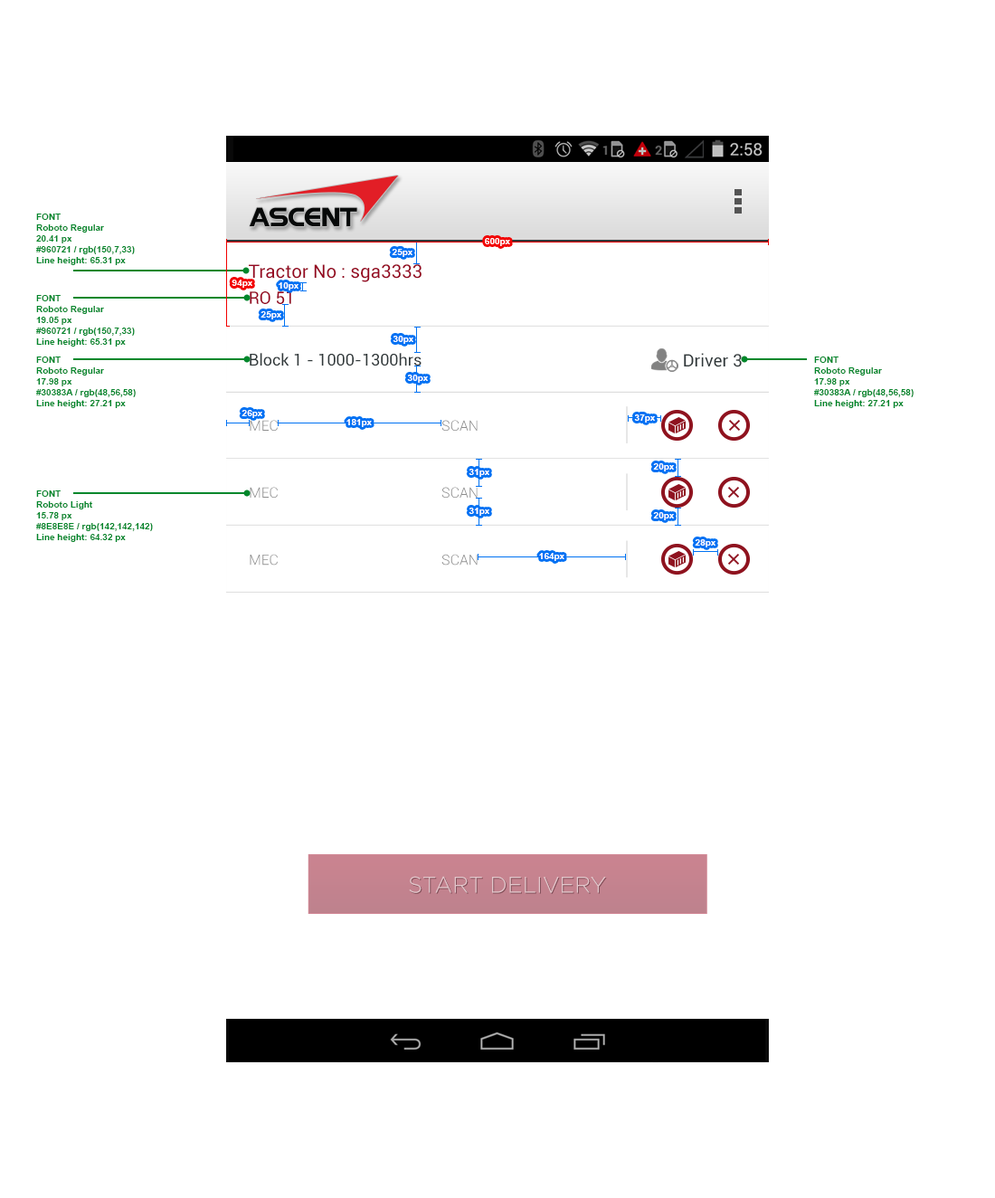
<style>
.page{position:relative;width:995px;height:1198px;background:#ffffff}
.page>*{position:absolute;margin:0}
.t1{font:9px "Arial-BoldMT";color:#00872b}
.t2{font:9px "Arial-BoldMT";color:#ffffff}
.t3{font:18.5px "Roboto-Regular";color:#960721}
.t4{font:17.2px "Roboto-Regular";color:#960721}
.t5{font:16.3px "Roboto-Regular";color:#30383a}
.t6{font:17.2px "Roboto-Regular";color:#30383a}
.t7{font:14.3px "Roboto-Light";color:#8e8e8e}
.t8{font:22.7px "Gotham-Light";color:#e3c7cc}
</style>
<div class="page">
<p class="t1" style="left:36px;top:214px;width:99px;height:51px">FONT <br>Roboto Regular<br>20.41 px<br>#960721 / rgb(150,7,33)<br>Line height: 65.31 px</p>
<p class="t2" style="left:485px;top:238px;width:25px;height:8px">600px</p>
<p class="t2" style="left:392px;top:249px;width:21px;height:8px">25px</p>
<p class="t3" style="left:249px;top:264px;width:173px;height:18px">Tractor No : sga3333</p>
<p class="t2" style="left:232px;top:280px;width:20px;height:8px">94px</p>
<p class="t4" style="left:250px;top:291px;width:41px;height:13px">RO 51</p>
<p class="t2" style="left:279px;top:282px;width:20px;height:8px">10px</p>
<p class="t1" style="left:36px;top:295px;width:99px;height:52px">FONT <br>Roboto Regular<br>19.05 px<br>#960721 / rgb(150,7,33)<br>Line height: 65.31 px</p>
<p class="t2" style="left:261px;top:311px;width:20px;height:8px">25px</p>
<p class="t2" style="left:393px;top:336px;width:21px;height:8px">30px</p>
<p class="t5" style="left:250px;top:353px;width:172px;height:13px">Block 1 - 1000-1300hrs</p>
<p class="t6" style="left:684px;top:353px;width:58px;height:14px">Driver 3</p>
<p class="t1" style="left:36px;top:357px;width:100px;height:51px">FONT <br>Roboto Regular<br>17.98 px<br>#30383A / rgb(48,56,58)<br>Line height: 27.21 px</p>
<p class="t1" style="left:814px;top:357px;width:100px;height:51px">FONT <br>Roboto Regular<br>17.98 px<br>#30383A / rgb(48,56,58)<br>Line height: 27.21 px</p>
<p class="t2" style="left:407px;top:375px;width:21px;height:8px">30px</p>
<p class="t2" style="left:242px;top:410px;width:20px;height:8px">26px</p>
<p class="t7" style="left:250px;top:420px;width:28px;height:11px">MEC</p>
<p class="t2" style="left:347px;top:419px;width:25px;height:8px">181px</p>
<p class="t7" style="left:442px;top:420px;width:36px;height:11px">SCAN</p>
<p class="t2" style="left:634px;top:414px;width:21px;height:9px">37px</p>
<p class="t2" style="left:469px;top:469px;width:21px;height:8px">31px</p>
<p class="t2" style="left:653px;top:463px;width:21px;height:8px">20px</p>
<p class="t1" style="left:36px;top:490px;width:117px;height:52px">FONT <br>Roboto Light<br>15.78 px<br>#8E8E8E / rgb(142,142,142)<br>Line height: 64.32 px</p>
<p class="t7" style="left:250px;top:487px;width:28px;height:11px">MEC</p>
<p class="t7" style="left:442px;top:487px;width:36px;height:11px">SCAN</p>
<p class="t2" style="left:469px;top:508px;width:21px;height:8px">31px</p>
<p class="t2" style="left:653px;top:512px;width:21px;height:8px">20px</p>
<p class="t2" style="left:695px;top:539px;width:21px;height:8px">28px</p>
<p class="t7" style="left:250px;top:554px;width:28px;height:12px">MEC</p>
<p class="t7" style="left:442px;top:554px;width:36px;height:12px">SCAN</p>
<p class="t2" style="left:539px;top:553px;width:26px;height:8px">164px</p>
<p class="t8" style="left:409px;top:876px;width:197px;height:17px">START DELIVERY</p>
</div>
